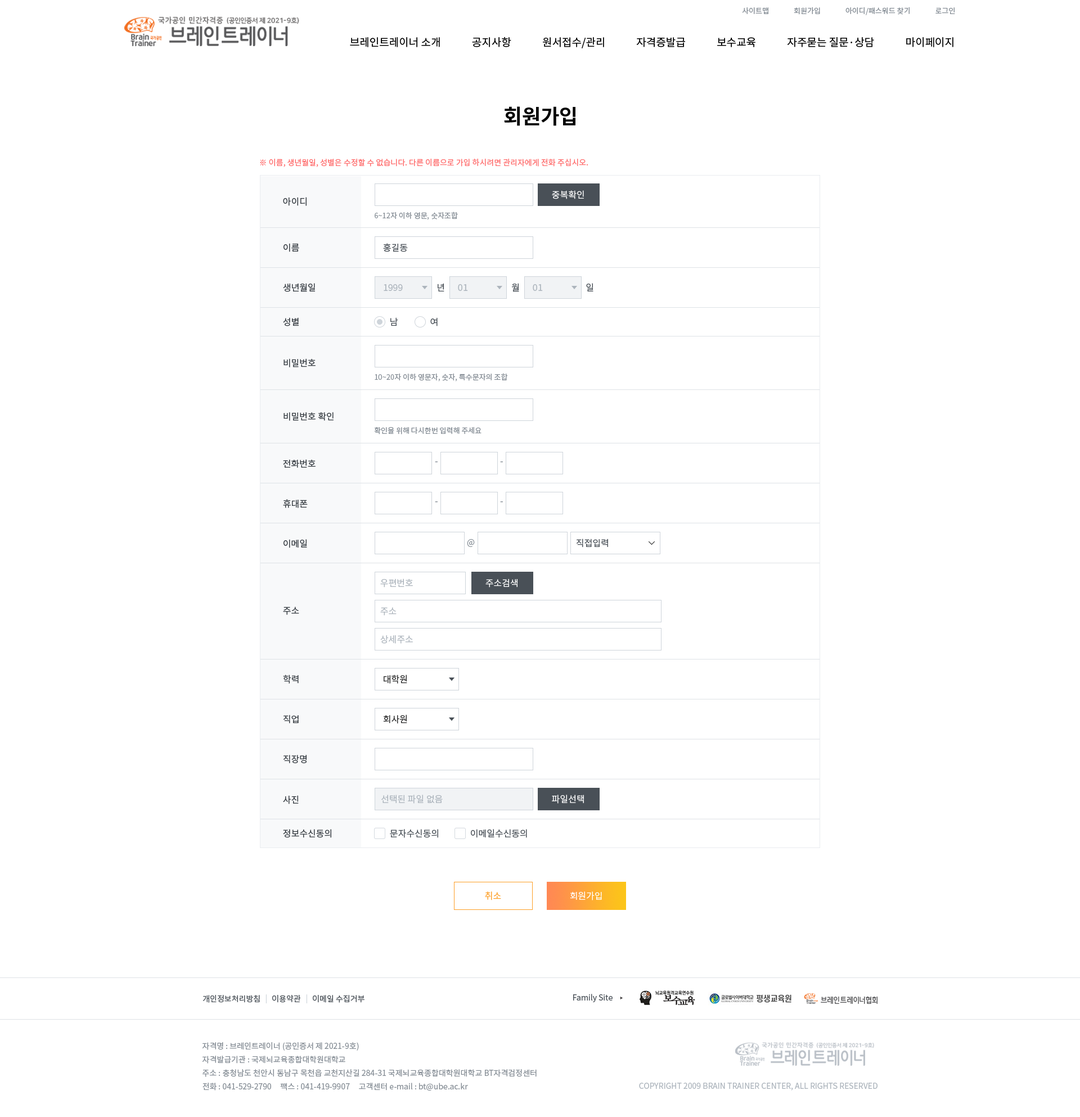
<style>
.page{position:relative;width:1080px;height:1117px;background:#ffffff}
.page>*{position:absolute;margin:0}
.t1{font:7.3px "NotoSansCJKkr-Regular";letter-spacing:0.001em;color:#868e96}
.t2{font:10.7px "NotoSansCJKkr-Regular";color:#000000}
.t3{font:20.2px "NotoSansCJKkr-Bold";color:#000000}
.t4{font:7.9px "NotoSansCJKkr-Regular";color:#ff6b6b;text-transform:uppercase}
.t5{font:9px "NotoSansCJKkr-Regular";color:#343a40;text-transform:uppercase}
.t6{font:9px "NotoSansCJKkr-Regular";color:#ffffff;text-transform:uppercase}
.t7{font:7.3px "NotoSansCJKkr-Regular";color:#868e96;text-transform:uppercase}
.t8{font:9px "NotoSansCJKkr-Regular";color:#495057;text-transform:uppercase}
.t9{font:9px "NotoSansCJKkr-Regular";color:#adb5bd;text-transform:uppercase}
.t10{font:9px "NotoSansCJKkr-Regular";color:#868e96;text-transform:uppercase}
.t11{font:8.4px "NotoSansCJKkr-Regular";color:#868e96;text-transform:uppercase}
.t12{font:9px "NotoSansCJKkr-Regular";color:#2b2b2b;text-transform:uppercase}
.t13{font:9px "NotoSansCJKkr-Regular";color:#fd9f27;text-transform:uppercase}
.t14{font:7.9px "NotoSansCJKkr-Regular";color:#495057}
.t15{font:7.9px "NotoSansCJKkr-Regular";color:#ced4da}
.t16{font:7.9px/13.5px "NotoSansCJKkr-Regular";color:#868e96}
.t17{font:7.9px "NotoSansCJKkr-Regular";color:#adb5bd}
</style>
<div class="page">
<p class="t1" style="left:742px;top:7px;width:213px;height:8px">사이트맵               회원가입               아이디/패스워드 찾기               로그인</p>
<p class="t2" style="left:350px;top:37px;width:603px;height:11px">브레인트레이너 소개             공지사항             원서접수/관리             자격증발급             보수교육             자주묻는 질문·상담             마이페이지</p>
<p class="t3" style="left:504px;top:106px;width:71px;height:20px">회원가입</p>
<p class="t4" style="left:260px;top:159px;width:328px;height:8px">※ 이름, 생년월일, 성별은 수정할 수 없습니다. 다른 이름으로 가입 하시려면 관리자에게 전화 주십시오.</p>
<p class="t5" style="left:283px;top:197px;width:24px;height:9px">아이디</p>
<p class="t6" style="left:552px;top:190px;width:32px;height:9px">중복확인</p>
<p class="t7" style="left:375px;top:212px;width:83px;height:8px">6~12자 이하 영문, 숫자조합</p>
<p class="t5" style="left:284px;top:243px;width:15px;height:9px">이름</p>
<p class="t8" style="left:383px;top:243px;width:25px;height:9px">홍길동</p>
<p class="t5" style="left:283px;top:283px;width:32px;height:9px">생년월일</p>
<p class="t9" style="left:384px;top:284px;width:19px;height:7px">1999</p>
<p class="t8" style="left:438px;top:283px;width:6px;height:8px">년</p>
<p class="t9" style="left:458px;top:284px;width:10px;height:7px">01</p>
<p class="t8" style="left:512px;top:283px;width:7px;height:9px">월</p>
<p class="t9" style="left:533px;top:284px;width:10px;height:7px">01</p>
<p class="t8" style="left:586px;top:283px;width:7px;height:8px">일</p>
<p class="t5" style="left:283px;top:317px;width:16px;height:9px">성별</p>
<p class="t8" style="left:390px;top:317px;width:8px;height:9px">남</p>
<p class="t8" style="left:430px;top:317px;width:8px;height:9px">여</p>
<p class="t5" style="left:284px;top:358px;width:32px;height:9px">비밀번호</p>
<p class="t7" style="left:375px;top:373px;width:133px;height:8px">10~20자 이하 영문자, 숫자, 특수문자의 조합</p>
<p class="t5" style="left:284px;top:412px;width:50px;height:9px">비밀번호 확인</p>
<p class="t7" style="left:374px;top:426px;width:108px;height:8px">확인을 위해 다시한번 입력해 주세요</p>
<p class="t5" style="left:283px;top:459px;width:33px;height:8px">전화번호</p>
<p class="t10" style="left:435px;top:461px;width:3px;height:1px">-</p>
<p class="t10" style="left:500px;top:461px;width:3px;height:1px">-</p>
<p class="t5" style="left:283px;top:499px;width:25px;height:9px">휴대폰</p>
<p class="t10" style="left:435px;top:501px;width:3px;height:1px">-</p>
<p class="t10" style="left:500px;top:501px;width:3px;height:1px">-</p>
<p class="t5" style="left:284px;top:539px;width:23px;height:9px">이메일</p>
<p class="t11" style="left:467px;top:539px;width:8px;height:8px">@</p>
<p class="t8" style="left:576px;top:538px;width:32px;height:9px">직접입력</p>
<p class="t9" style="left:380px;top:578px;width:33px;height:9px">우편번호</p>
<p class="t6" style="left:485px;top:578px;width:33px;height:9px">주소검색</p>
<p class="t5" style="left:283px;top:606px;width:16px;height:9px">주소</p>
<p class="t9" style="left:380px;top:607px;width:17px;height:8px">주소</p>
<p class="t9" style="left:380px;top:634px;width:33px;height:10px">상세주소</p>
<p class="t5" style="left:283px;top:674px;width:16px;height:9px">학력</p>
<p class="t12" style="left:384px;top:674px;width:23px;height:9px">대학원</p>
<p class="t5" style="left:283px;top:714px;width:16px;height:9px">직업</p>
<p class="t12" style="left:383px;top:714px;width:24px;height:9px">회사원</p>
<p class="t5" style="left:283px;top:754px;width:24px;height:9px">직장명</p>
<p class="t5" style="left:283px;top:795px;width:16px;height:9px">사진</p>
<p class="t9" style="left:381px;top:794px;width:62px;height:9px">선택된 파일 없음</p>
<p class="t6" style="left:552px;top:794px;width:32px;height:9px">파일선택</p>
<p class="t5" style="left:283px;top:829px;width:48px;height:9px">정보수신동의</p>
<p class="t8" style="left:390px;top:829px;width:48px;height:9px">문자수신동의</p>
<p class="t8" style="left:471px;top:829px;width:56px;height:9px">이메일수신동의</p>
<p class="t13" style="left:485px;top:891px;width:16px;height:9px">취소</p>
<p class="t6" style="left:570px;top:891px;width:32px;height:9px">회원가입</p>
<p class="t14" style="left:202px;top:994px;width:58px;height:8px">개인정보처리방침</p>
<p class="t15" style="left:266px;top:994px;width:1px;height:9px">|</p>
<p class="t14" style="left:272px;top:994px;width:29px;height:8px">이용약관</p>
<p class="t15" style="left:306px;top:994px;width:1px;height:9px">|</p>
<p class="t14" style="left:313px;top:994px;width:51px;height:8px">이메일 수집거부</p>
<p class="t14" style="left:573px;top:993px;width:40px;height:9px">Family Site</p>
<p class="t16" style="left:202px;top:1042px;width:335px;height:49px">자격명 : 브레인트레이너 (공인증서 제 2021-9호)<br>자격발급기관 : 국제뇌교육종합대학원대학교<br>주소 : 충청남도 천안시 동남구 목천읍 교천지산길 284-31 국제뇌교육종합대학원대학교 BT자격검정센터<br>전화 : 041-529-2790     팩스 : 041-419-9907     고객센터 e-mail : bt@ube.ac.kr</p>
<p class="t17" style="left:639px;top:1082px;width:239px;height:8px">COPYRIGHT 2009 BRAIN TRAINER CENTER, ALL RIGHTS RESERVED</p>
</div>
